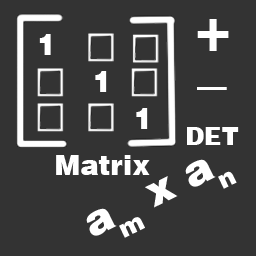
<style>
.page{position:relative;width:256px;height:256px;background:#333333}
.page>*{position:absolute;margin:0}
.t1{font:60.8px "HelveticaBlack";color:#ffffff}
.t2{font:29px "HelveticaBlack";color:#ffffff}
.t3{font:59.4px "HelveticaBlack";color:#ffffff}
.t4{font:24px "HelveticaBlack";color:#ffffff}
.t5{font:27.4px "HelveticaBlack";color:#ffffff}
.t6{font:42.7px "HelveticaBlack";color:#ffffff}
</style>
<div class="page">
<p class="t1" style="left:197px;top:19px;width:32px;height:32px">+</p>
<p class="t2" style="left:39px;top:34px;width:12px;height:21px">1</p>
<p class="t2" style="left:95px;top:71px;width:12px;height:21px">1</p>
<p class="t3" style="left:197px;top:87px;width:30px;height:3px">_</p>
<p class="t2" style="left:136px;top:108px;width:12px;height:21px">1</p>
<p class="t4" style="left:187px;top:127px;width:52px;height:18px">DET</p>
<p class="t5" style="left:56px;top:155px;width:94px;height:20px">Matrix</p>
<p class="t6" style="left:86px;top:159px;width:151px;height:79px;rotate:-26deg">am x an</p>
</div>
